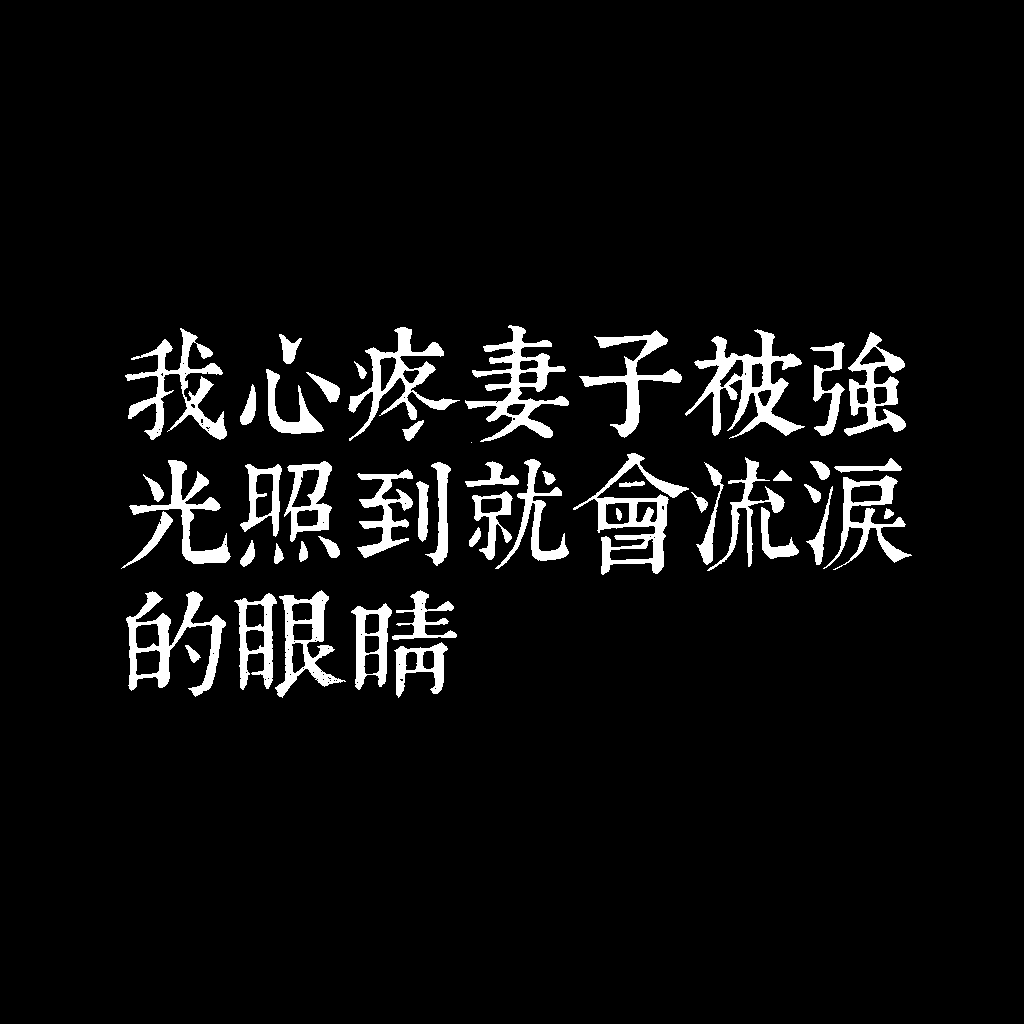
<style>
.page{position:relative;width:1024px;height:1024px;background:#000000}
.page>*{position:absolute;margin:0}
.t1{font:116px/130px "TpldKhangXiDictTrial";letter-spacing:-0.02em;color:#ffffff}
</style>
<div class="page">
<p class="t1" style="left:121px;top:325px;width:791px;height:373px">我心疼妻子被強<br>光照到就會流淚<br>的眼睛</p>
</div>
